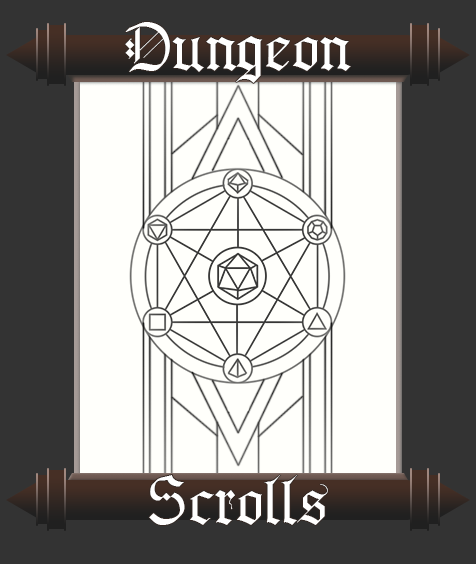
<style>
.page{position:relative;width:476px;height:564px;background:#333333}
.page>*{position:absolute;margin:0}
.t1{font:60px "GothenburgFraktur";color:#ffffff}
</style>
<div class="page">
<p class="t1" style="left:125px;top:22px;width:226px;height:61px">Dungeon</p>
<p class="t1" style="left:149px;top:475px;width:179px;height:50px">Scrolls</p>
</div>
